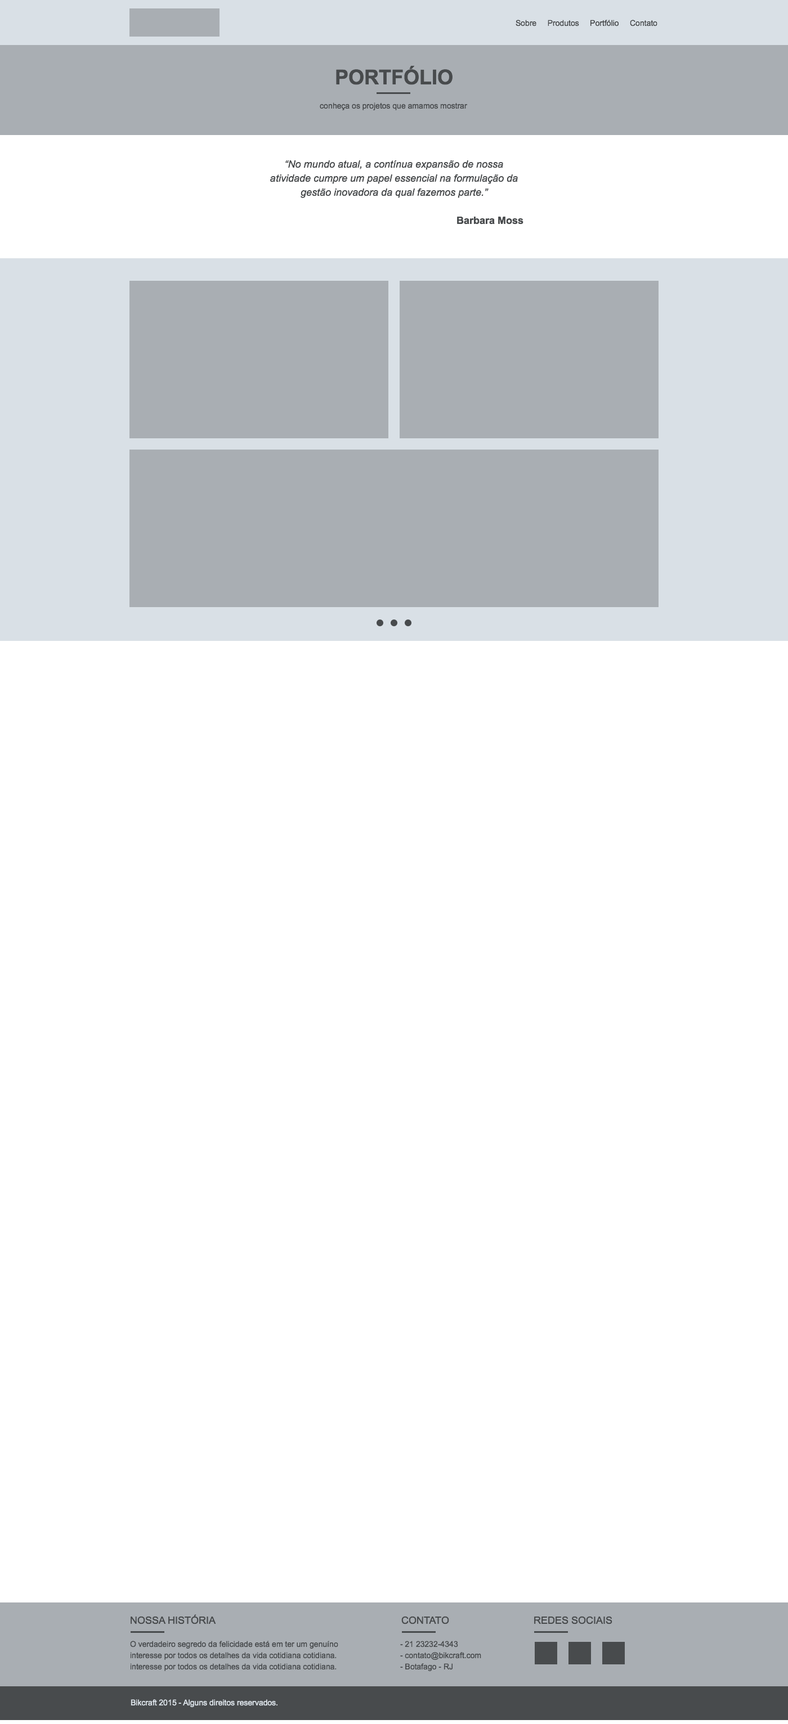
<style>
.page{position:relative;width:788px;height:1724px;background:#ffffff}
.page>*{position:absolute;margin:0}
.t1{font:7.9px "ArialMT";color:#484b4d}
.t2{font:20.2px "Arial-BoldMT";color:#484b4d;text-transform:uppercase}
.t3{font:10.1px/14.1px "Arial-ItalicMT";color:#484b4d}
.t4{font:10.1px/14.1px "Arial-BoldMT";color:#484b4d}
.t5{font:10.1px "ArialMT";color:#484b4d;text-transform:uppercase}
.t6{font:7.9px/11.2px "ArialMT";color:#484b4d}
.t7{font:7.9px "ArialMT";color:#d9e0e6}
</style>
<div class="page">
<p class="t1" style="left:515px;top:20px;width:142px;height:6px">Sobre     Produtos     Portfólio     Contato</p>
<p class="t2" style="left:336px;top:65px;width:116px;height:20px">PORTFÓLIO</p>
<p class="t1" style="left:320px;top:102px;width:147px;height:8px">conheça os projetos que amamos mostrar</p>
<p class="t3" style="left:270px;top:160px;width:253px;height:64px;text-align:center">“No mundo atual, a contínua expansão de nossa atividade cumpre um papel essencial na formulação da gestão inovadora da qual fazemos parte.”<br><br><span class="t4">Barbara Moss</span></p>
<p class="t5" style="left:131px;top:1614px;width:85px;height:10px">Nossa História</p>
<p class="t5" style="left:401px;top:1616px;width:48px;height:8px">Contato</p>
<p class="t5" style="left:534px;top:1616px;width:78px;height:8px">Redes sociais</p>
<p class="t6" style="left:130px;top:1640px;width:208px;height:31px">O verdadeiro segredo da felicidade está em ter um genuíno interesse por todos os detalhes da vida cotidiana cotidiana.<br>interesse por todos os detalhes da vida cotidiana cotidiana.</p>
<p class="t6" style="left:400px;top:1640px;width:81px;height:31px">- 21 23232-4343<br>- contato@bikcraft.com<br>- Botafago - RJ</p>
<p class="t7" style="left:131px;top:1699px;width:146px;height:8px">Bikcraft 2015 - Alguns direitos reservados.</p>
</div>
